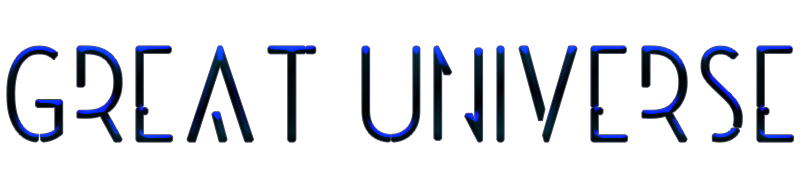
<style>
.page{position:relative;width:800px;height:180px;background:#ffffff}
.page>*{position:absolute;margin:0}
.t1{font:116.7px "Universe-Display";color:#000000;font-weight:bold}
</style>
<div class="page">
<p class="t1" style="left:7px;top:46px;width:787px;height:96px">Great Universe</p>
</div>
